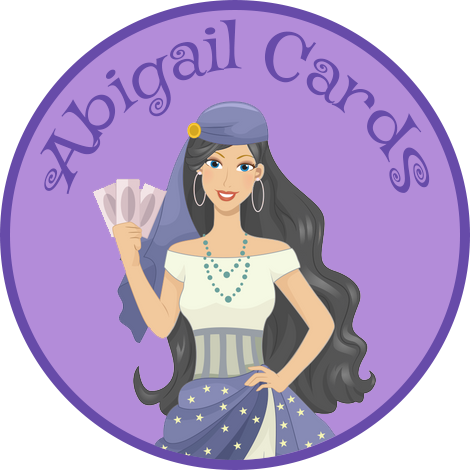
<style>
.page{position:relative;width:470px;height:470px;background:#b38cd9}
.page>*{position:absolute;margin:0}
.t1{font:62.9px "MysteryQuest";color:#674ba9;scale:0.83 1}
</style>
<div class="page">
<p class="t1" style="left:40px;top:19px;width:390px;height:175px;text-align:center">Abigail Cards</p>
</div>
